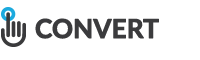
<style>
.page{position:relative;width:200px;height:60px;background:#ffffff}
.page>*{position:absolute;margin:0}
.t1{font:26px "Lato-Bold";letter-spacing:-0.02em;color:#3b3b3d;font-weight:bold}
</style>
<div class="page">
<p class="t1" style="left:35px;top:18px;width:124px;height:21px">CONVERT</p>
</div>
